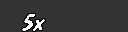
<style>
.page{position:relative;width:128px;height:32px;background:#333333}
.page>*{position:absolute;margin:0}
.t1{font:26px "DomDiagonalBT-Regular";color:#ffffff;scale:1.1 1}
</style>
<div class="page">
<p class="t1" style="left:22px;top:14px;width:23px;height:17px">5x</p>
</div>
